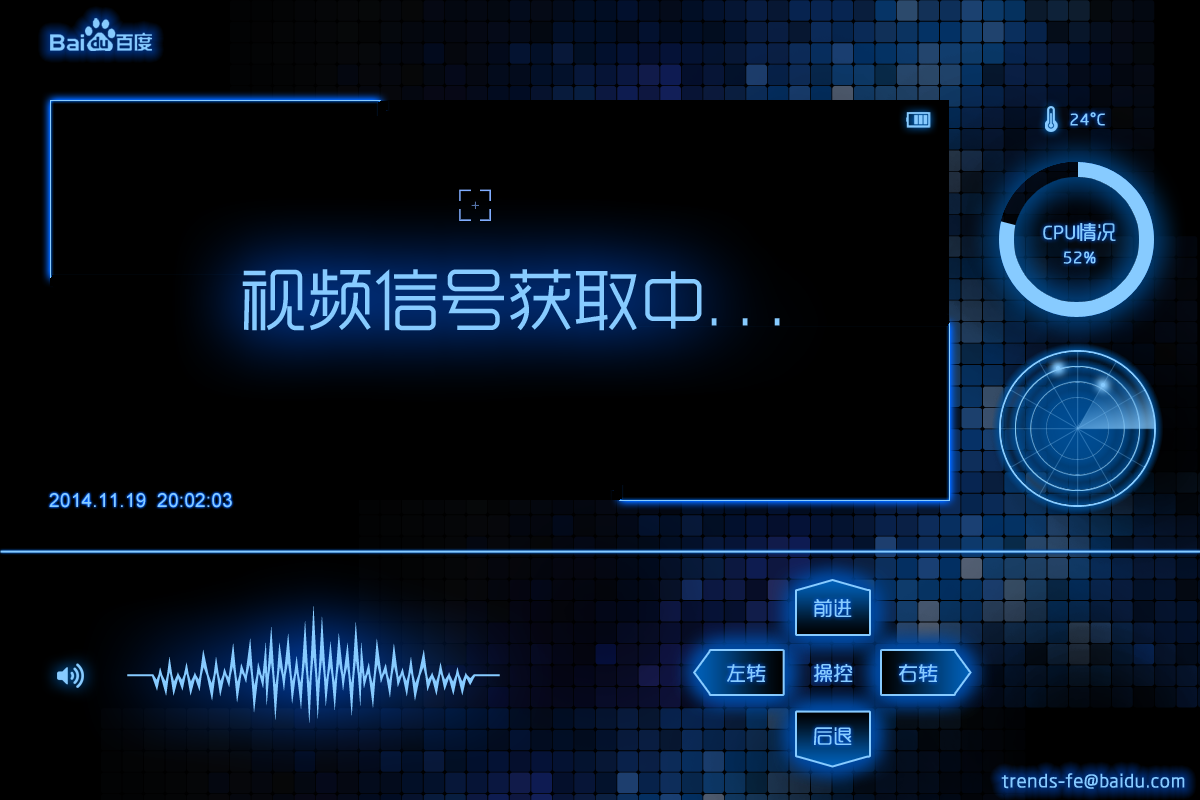
<style>
.page{position:relative;width:1200px;height:800px;background:#000000}
.page>*{position:absolute;margin:0}
.t1{font:16.7px "MFYueHei_Noncommercial-Regular";color:#87cbff;font-weight:bold}
.t2{font:19.4px "MFYueHei_Noncommercial-Regular";color:#87cbff;font-weight:bold}
.t3{font:66.7px "MFYueHei_Noncommercial-Regular";color:#87cbff}
.t4{font:19.4px "ArialMT";color:#87cbff}
</style>
<div class="page">
<p class="t1" style="left:1070px;top:112px;width:35px;height:14px">24°C</p>
<p class="t2" style="left:1043px;top:223px;width:73px;height:18px">CPU情况</p>
<p class="t1" style="left:1063px;top:251px;width:33px;height:13px">52%</p>
<p class="t3" style="left:242px;top:269px;width:538px;height:62px">视频信号获取中. . .</p>
<p class="t4" style="left:49px;top:493px;width:183px;height:15px">2014.11.19  20:02:03</p>
<p class="t2" style="left:814px;top:599px;width:38px;height:18px">前进</p>
<p class="t2" style="left:727px;top:664px;width:39px;height:18px">左转</p>
<p class="t2" style="left:813px;top:664px;width:40px;height:18px">操控</p>
<p class="t2" style="left:899px;top:664px;width:39px;height:18px">右转</p>
<p class="t2" style="left:814px;top:727px;width:38px;height:18px">后退</p>
<p class="t2" style="left:1001px;top:773px;width:184px;height:16px">trends-fe@baidu.com</p>
</div>
